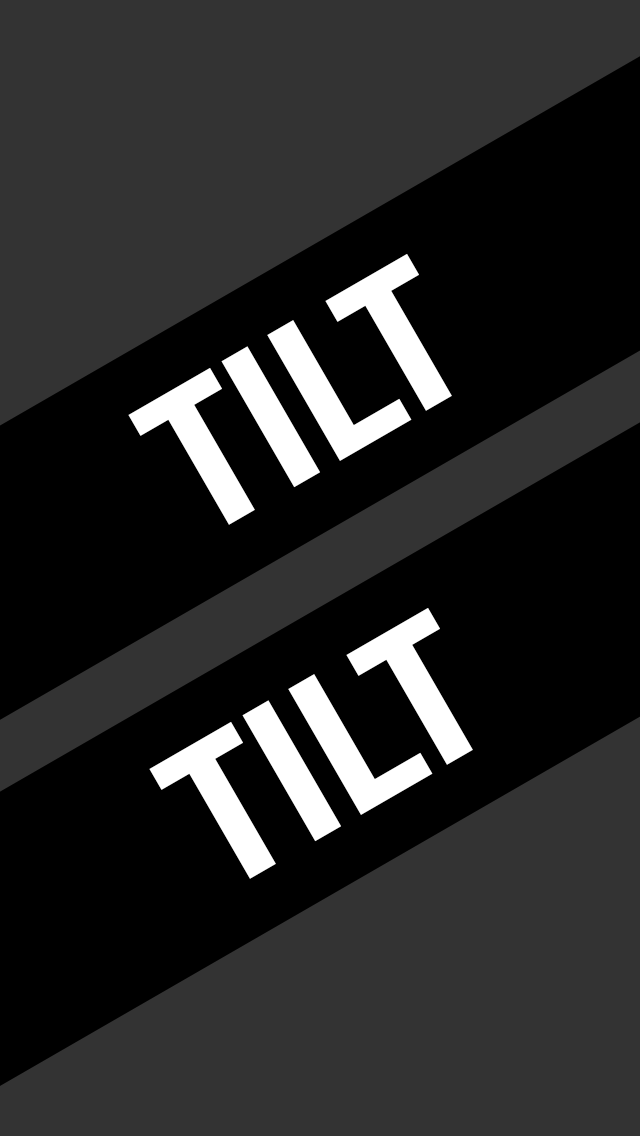
<style>
.page{position:relative;width:640px;height:1136px;background:#333333}
.page>*{position:absolute;margin:0}
.t1{font:101.6px "HelveticaNeue-CondensedBold";color:#ffffff}
</style>
<div class="page">
<p class="t1" style="left:128px;top:253px;width:324px;height:272px;rotate:-30deg">TILT</p>
<p class="t1" style="left:149px;top:607px;width:324px;height:272px;rotate:-30deg">TILT</p>
</div>
